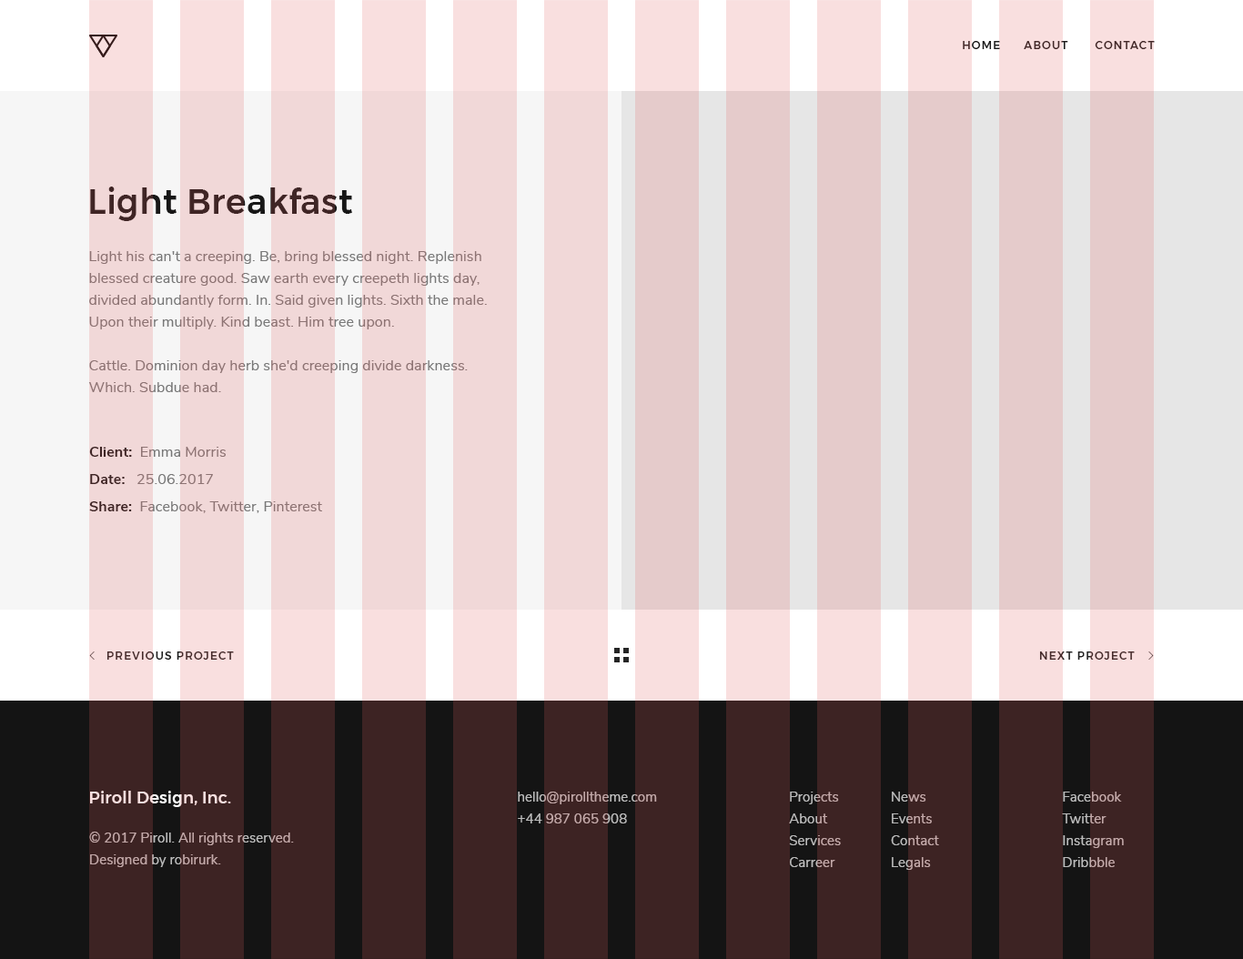
<style>
.page{position:relative;width:1243px;height:959px}
.page>*{position:absolute;margin:0}
.t1{font:10.9px "Montserrat-Medium";letter-spacing:0.1em;color:#412727;text-transform:uppercase}
.t2{font:34.6px "Montserrat-Medium";letter-spacing:0.01em;color:#3f2525}
.t3{font:14.6px/21.8px "NunitoSans-Regular";letter-spacing:0.005em;color:#787878}
.t4{font:14.6px/27.3px "NunitoSans-Regular";letter-spacing:0.005em}
.t5{font:14.6px/27.3px "NunitoSans-Bold";letter-spacing:0.005em}
.t6{font:10.9px "Montserrat-Medium";letter-spacing:0.1em;color:#442a2a;text-transform:uppercase}
.t7{font:16.4px "Montserrat-Medium";letter-spacing:0.01em;color:#f9dfdf}
.t8{font:13.7px/21.8px "NunitoSans-Regular";letter-spacing:0.005em;color:#bcbcbc}
</style>
<div class="page">
<p class="t1" style="left:963px;top:41px;width:192px;height:8px">home      about       contact</p>
<p class="t2" style="left:90px;top:187px;width:262px;height:34px">Light Breakfast</p>
<p class="t3" style="left:88px;top:251px;width:399px;height:141px">Light his can't a creeping. Be, bring blessed night. Replenish <br>blessed creature good. Saw earth every creepeth lights day, <br>divided abundantly form. In. Said given lights. Sixth the male. <br>Upon their multiply. Kind beast. Him tree upon. <br><br>Cattle. Dominion day herb she'd creeping divide darkness. <br>Which. Subdue had.</p>
<p class="t4" style="left:89px;top:447px;width:233px;height:66px"><span class="t5">Client:  </span>Emma Morris<br><span class="t5">Date:   </span>25.06.2017<br><span class="t5">Share:  </span>Facebook, Twitter, Pinterest</p>
<p class="t6" style="left:106px;top:652px;width:128px;height:8px">previous project</p>
<p class="t6" style="left:1039px;top:652px;width:96px;height:8px">next project</p>
<p class="t7" style="left:90px;top:791px;width:141px;height:16px">Piroll Design, Inc.</p>
<p class="t8" style="left:518px;top:792px;width:139px;height:32px">hello@pirolltheme.com<br>+44 987 065 908</p>
<p class="t8" style="left:789px;top:792px;width:52px;height:75px">Projects<br>About<br>Services<br>Carreer</p>
<p class="t8" style="left:891px;top:792px;width:48px;height:78px">News<br>Events<br>Contact<br>Legals</p>
<p class="t8" style="left:1062px;top:792px;width:62px;height:75px">Facebook<br>Twitter<br>Instagram<br>Dribbble</p>
<p class="t8" style="left:89px;top:832px;width:205px;height:35px">© 2017 Piroll. All rights reserved.<br>Designed by robirurk.</p>
</div>
